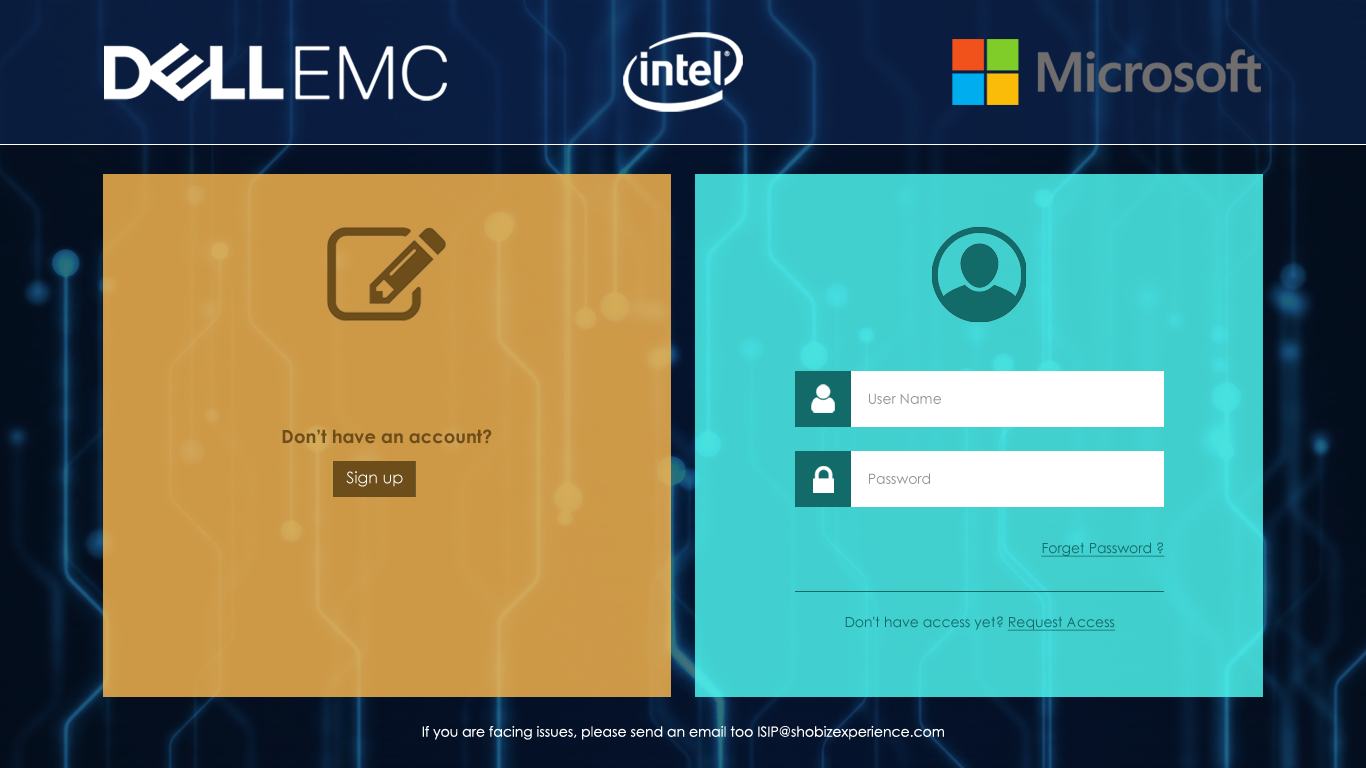
<style>
.page{position:relative;width:1366px;height:768px}
.page>*{position:absolute;margin:0}
.t1{font:14px "CenturyGothic";color:#929292}
.t2{font:18px "CenturyGothic-Bold";color:#6d4d19}
.t3{font:16px "CenturyGothic";color:#ffffff}
.t4{font:14px "CenturyGothic";color:#126a69;text-decoration:underline}
.t5{font:14px "CenturyGothic";color:#126a69}
.t6{font:14px "CenturyGothic";color:#fffeff}
</style>
<div class="page">
<p class="t1" style="left:869px;top:393px;width:72px;height:11px">User Name</p>
<p class="t2" style="left:282px;top:429px;width:210px;height:15px">Don’t have an account?</p>
<p class="t3" style="left:346px;top:471px;width:57px;height:16px">Sign up</p>
<p class="t1" style="left:869px;top:473px;width:61px;height:11px">Password</p>
<p class="t4" style="left:1041px;top:542px;width:124px;height:15px">Forget Password ?</p>
<p class="t5" style="left:845px;top:616px;width:271px;height:15px">Don't have access yet? <span class="t4">Request Access</span></p>
<p class="t6" style="left:422px;top:726px;width:522px;height:14px">If you are facing issues, please send an email too ISIP@shobizexperience.com</p>
</div>
